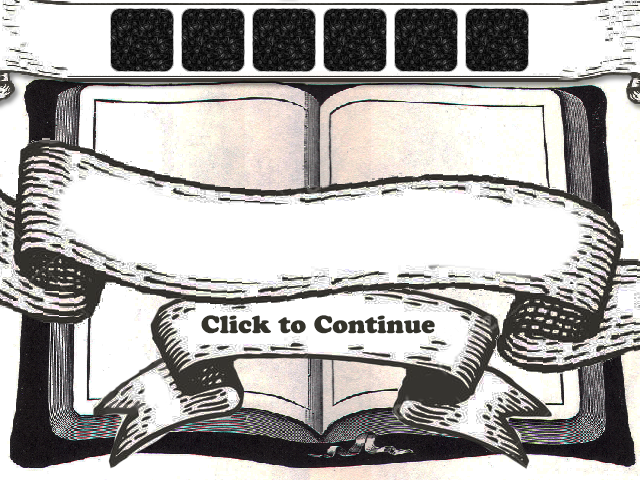
<style>
.page{position:relative;width:640px;height:480px;background:#ffffff}
.page>*{position:absolute;margin:0}
.t1{font:24.5px "CooperBlackStd";color:#34332b}
</style>
<div class="page">
<p class="t1" style="left:201px;top:315px;width:234px;height:19px">Click to Continue</p>
</div>
